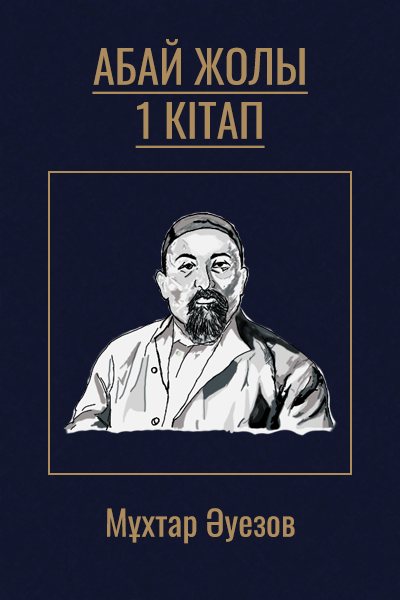
<style>
.page{position:relative;width:400px;height:600px;background:#12162d}
.page>*{position:absolute;margin:0}
.t1{font:45px "Oswald-Regular";color:#ac8c5c;text-decoration:underline}
.t2{font:35px "Oswald-Regular";color:#ac8c5c}
</style>
<div class="page">
<p class="t1" style="left:92px;top:39px;width:216px;height:109px;text-align:center">АБАЙ ЖОЛЫ<br>1 КІТАП</p>
<p class="t2" style="left:107px;top:508px;width:188px;height:36px">Мұхтар Әуезов</p>
</div>
